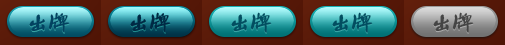
<style>
.page{position:relative;width:505px;height:45px}
.page>*{position:absolute;margin:0}
.t1{font:24px "SunYatsenHsingshu-";letter-spacing:-0.1em;color:#024361}
.t2{font:24px "SunYatsenHsingshu-";letter-spacing:-0.1em;color:#024e61}
.t3{font:24px "SunYatsenHsingshu-";letter-spacing:-0.1em;color:#454545}
</style>
<div class="page">
<p class="t1" style="left:29px;top:12px;width:41px;height:21px">出牌</p>
<p class="t2" style="left:231px;top:12px;width:41px;height:21px">出牌</p>
<p class="t2" style="left:332px;top:12px;width:41px;height:21px">出牌</p>
<p class="t3" style="left:433px;top:12px;width:41px;height:21px">出牌</p>
</div>
